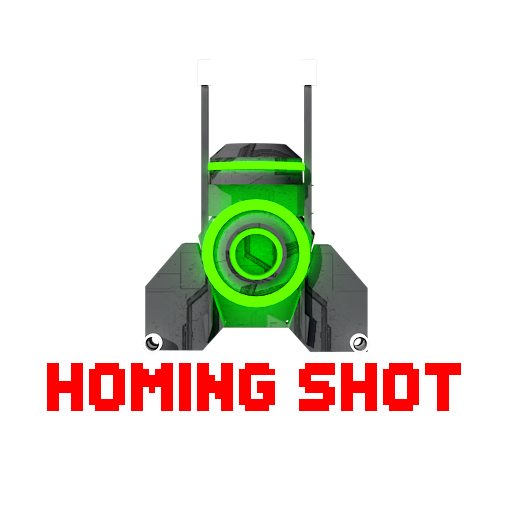
<style>
.page{position:relative;width:512px;height:512px;background:#ffffff}
.page>*{position:absolute;margin:0}
.t1{font:48px "Header0865";color:#ff0000}
</style>
<div class="page">
<p class="t1" style="left:47px;top:363px;width:414px;height:48px">HOMING SHOT</p>
</div>
